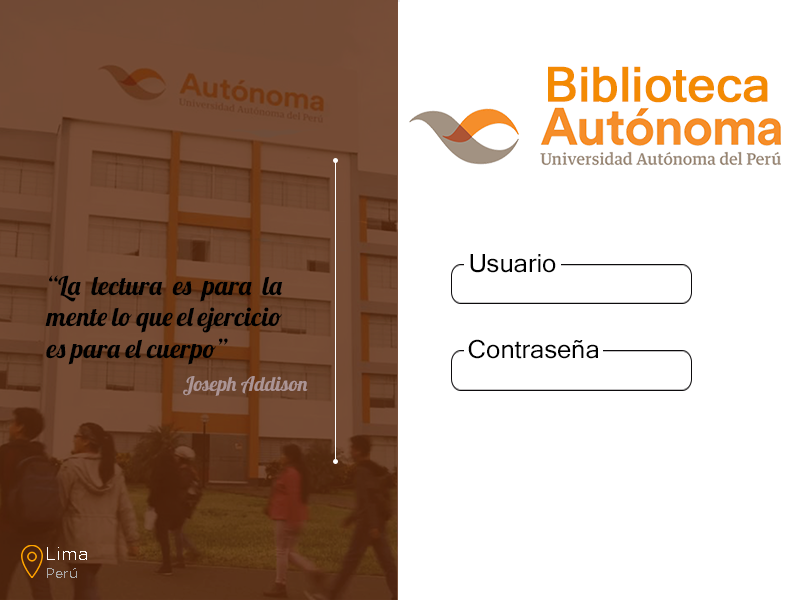
<style>
.page{position:relative;width:800px;height:600px;background:#ffffff}
.page>*{position:absolute;margin:0}
.t1{font:48px "MicrosoftSansSerif";color:#f38a03;font-weight:bold}
.t2{font:25px "MicrosoftSansSerif";color:#000000}
.t3{font:26px "Lobster-Regular";color:#000000}
.t4{font:20px "Lobster-Regular";color:#ab9494}
.t5{font:18px "GothamBook";color:#ffffff}
.t6{font:14px "GothamBook";color:#aaa9a9}
</style>
<div class="page">
<p class="t1" style="left:548px;top:66px;width:220px;height:37px">Biblioteca</p>
<p class="t2" style="left:470px;top:254px;width:86px;height:19px">Usuario</p>
<p class="t3" style="left:45px;top:275px;width:238px;height:90px;text-align:justify">“La lectura es para la mente lo que el ejercicio es para el cuerpo”</p>
<p class="t2" style="left:468px;top:339px;width:130px;height:20px">Contraseña</p>
<p class="t4" style="left:183px;top:376px;width:125px;height:20px">Joseph Addison</p>
<p class="t5" style="left:47px;top:547px;width:40px;height:13px">Lima</p>
<p class="t6" style="left:47px;top:568px;width:30px;height:10px">Perú</p>
</div>
